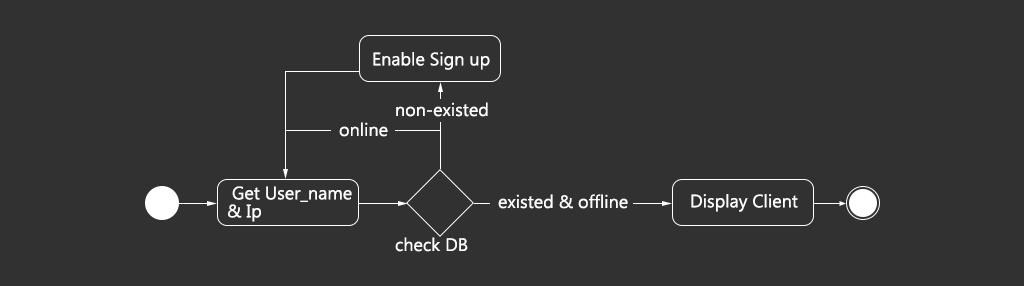
<style>
.page{position:relative;width:1024px;height:286px;background:#313131}
.page>*{position:absolute;margin:0}
.t1{font:18px "MicrosoftNewTaiLue";color:#ffffff}
.t2{font:18px/18px "MicrosoftNewTaiLue";color:#ffffff}
</style>
<div class="page">
<p class="t1" style="left:373px;top:52px;width:117px;height:18px">Enable Sign up</p>
<p class="t1" style="left:396px;top:102px;width:92px;height:15px">non-existed</p>
<p class="t1" style="left:339px;top:122px;width:49px;height:15px">online</p>
<p class="t2" style="left:228px;top:186px;width:124px;height:36px">Get User_name &amp; Ip</p>
<p class="t1" style="left:498px;top:194px;width:130px;height:15px">existed &amp; offline</p>
<p class="t1" style="left:691px;top:194px;width:107px;height:18px">Display Client</p>
<p class="t1" style="left:395px;top:237px;width:73px;height:15px">check DB</p>
</div>
